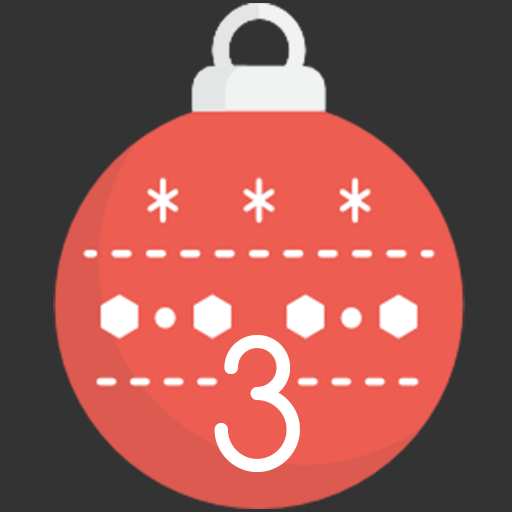
<style>
.page{position:relative;width:512px;height:512px;background:#333333}
.page>*{position:absolute;margin:0}
.t1{font:213.3px "Antipasto";color:#ffffff}
</style>
<div class="page">
<p class="t1" style="left:214px;top:335px;width:86px;height:137px">3</p>
</div>
